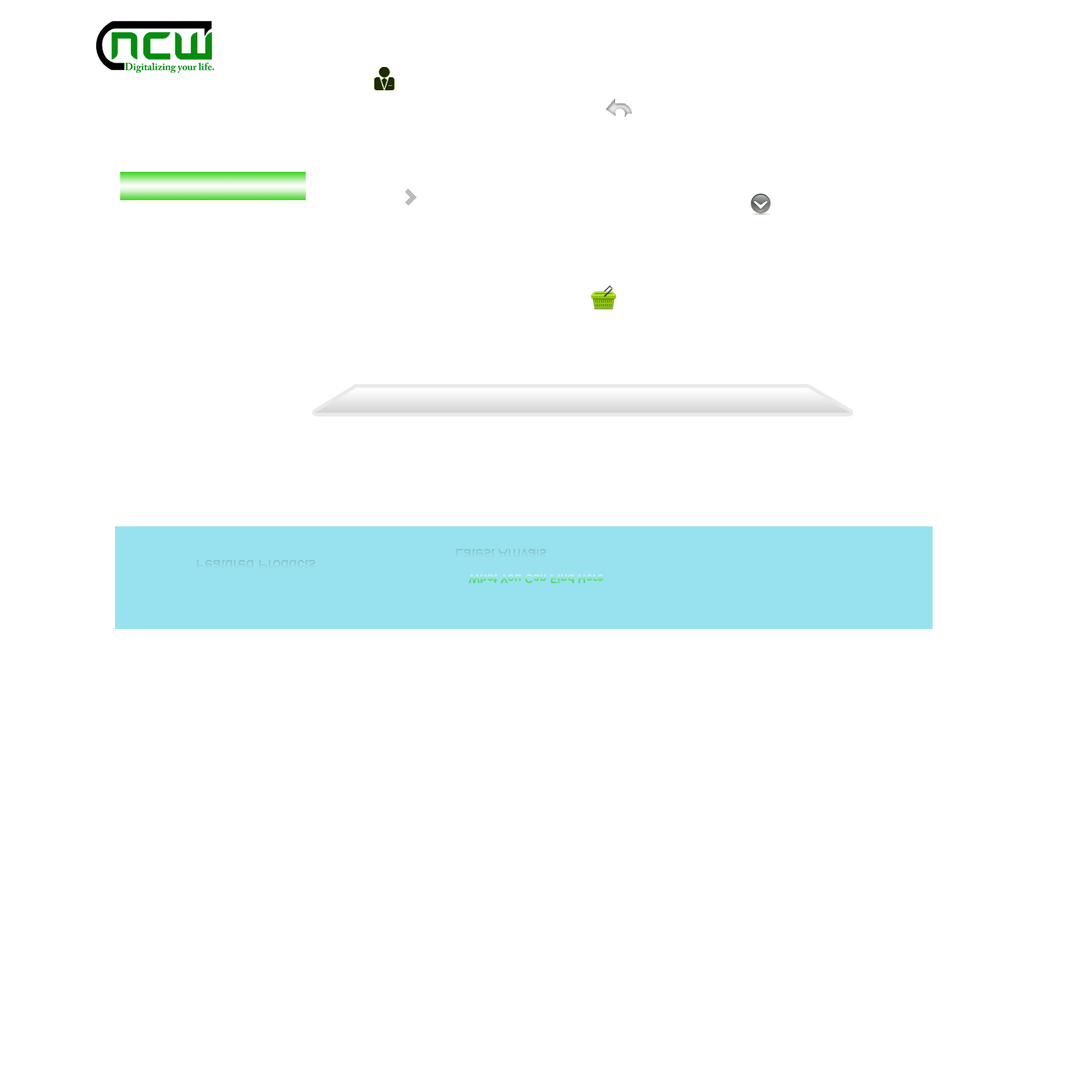
<style>
.page{position:relative;width:1092px;height:1092px;background:#ffffff}
.page>*{position:absolute;margin:0}
.t1{font:14.6px "ArialMT";color:#8ccdd8}
.t2{font:14.6px "ArialMT";color:#8fd0db}
.t3{font:11.6px "Arial-BoldMT"}
</style>
<div class="page">
<p class="t1" style="left:456px;top:549px;width:91px;height:11px">Latest Arrivals</p>
<p class="t2" style="left:197px;top:560px;width:118px;height:11px">Featured Products</p>
<p class="t3" style="left:469px;top:574px;width:135px;height:9px">What You Can Find Here</p>
</div>
